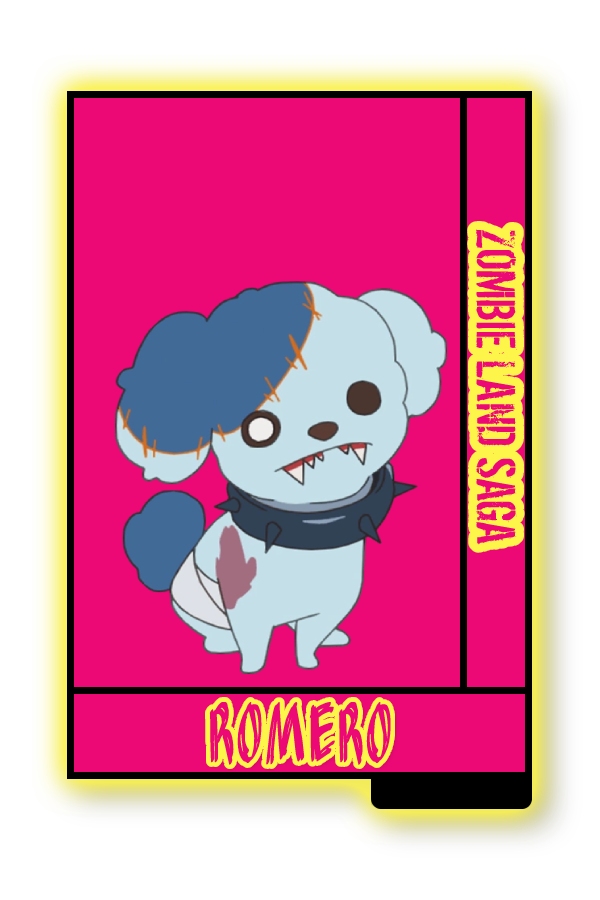
<style>
.page{position:relative;width:600px;height:900px;background:#ec0976}
.page>*{position:absolute;margin:0}
.t1{font:60.3px "DirtyEgo";color:#ec0976;scale:1.05 1}
.t2{font:72.2px "AnuDaw";color:#ec0976;scale:0.47 1}
</style>
<div class="page">
<p class="t1" style="left:476px;top:229px;width:41px;height:316px;rotate:90deg">ZOMBIE LAND SAGA</p>
<p class="t2" style="left:209px;top:701px;width:182px;height:64px">Romero</p>
</div>
